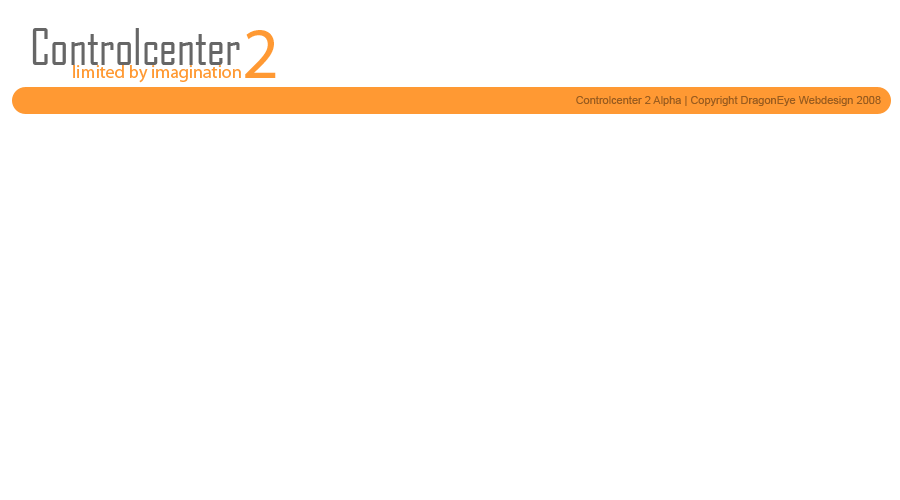
<style>
.page{position:relative;width:900px;height:500px;background:#ffffff}
.page>*{position:absolute;margin:0}
.t1{font:48px "AgencyFB-Reg";color:#666666}
.t2{font:72px "MyriadPro-Regular";color:#ff9933}
.t3{font:18px "MyriadPro-Regular";color:#ff9933}
.t4{font:11px "ArialMT";color:#995c1f}
</style>
<div class="page">
<p class="t1" style="left:32px;top:28px;width:208px;height:37px">Controlcenter</p>
<p class="t2" style="left:245px;top:30px;width:31px;height:48px">2</p>
<p class="t3" style="left:73px;top:65px;width:168px;height:18px">limited by imagination</p>
<p class="t4" style="left:576px;top:96px;width:305px;height:10px">Controlcenter 2 Alpha | Copyright DragonEye Webdesign 2008</p>
</div>
